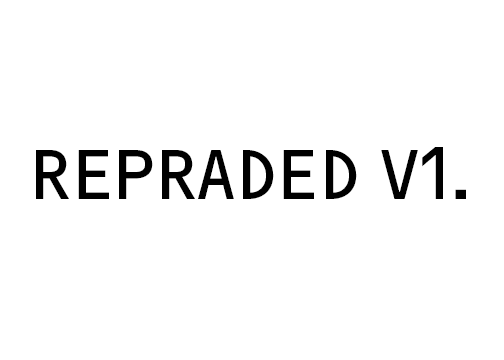
<style>
.page{position:relative;width:504px;height:360px;background:#ffffff}
.page>*{position:absolute;margin:0}
.t1{font:72px "F2FOCRBczykLTStd-Regular";color:#000000}
</style>
<div class="page">
<p class="t1" style="left:36px;top:147px;width:430px;height:52px">REPRADED V1.</p>
</div>
